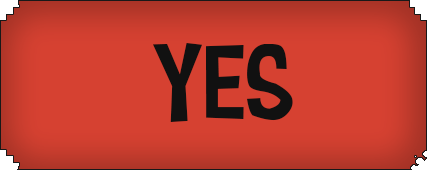
<style>
.page{position:relative;width:427px;height:170px;background:#d64131}
.page>*{position:absolute;margin:0}
.t1{font:140.8px "CartonsixNC";color:#111111}
</style>
<div class="page">
<p class="t1" style="left:153px;top:43px;width:140px;height:79px">YEs</p>
</div>
